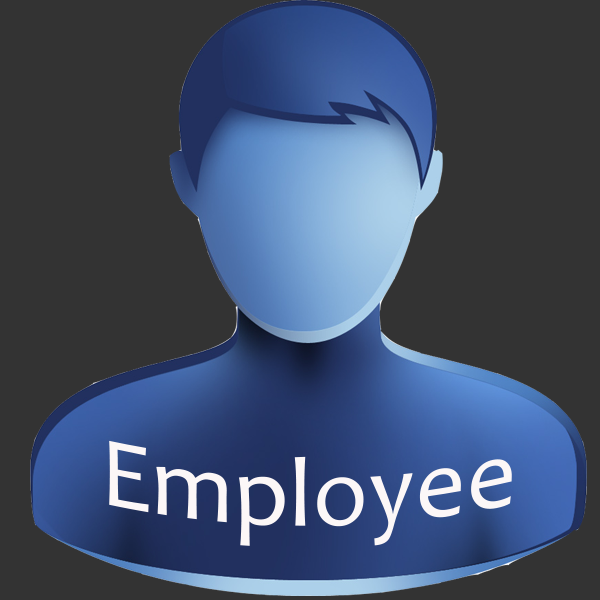
<style>
.page{position:relative;width:600px;height:600px;background:#333333}
.page>*{position:absolute;margin:0}
.t1{font:99.7px "Candara";color:#fcf7f7}
</style>
<div class="page">
<p class="t1" style="left:109px;top:440px;width:403px;height:106px">Employee</p>
</div>
